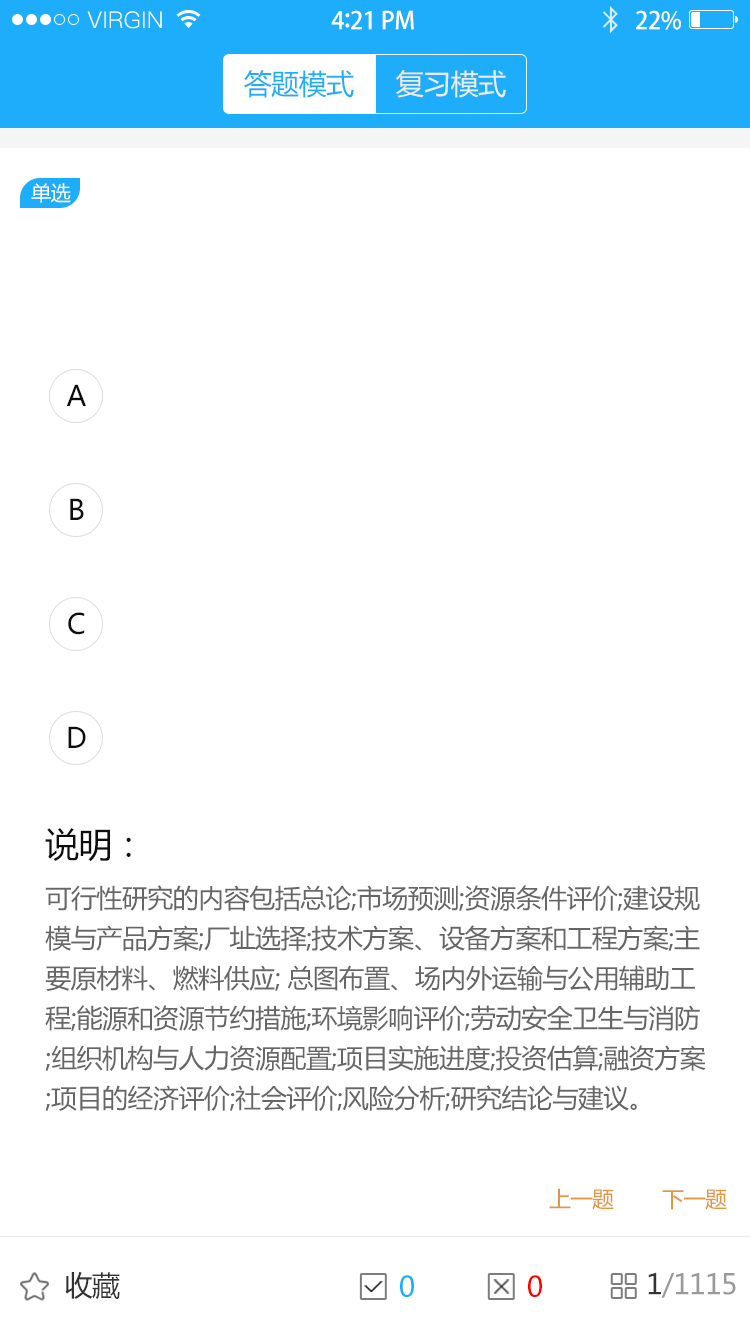
<style>
.page{position:relative;width:750px;height:1334px;background:#ffffff}
.page>*{position:absolute;margin:0}
.t1{font:23px "PingFang-SC-Regular";letter-spacing:0.02em;color:#ffffff}
.t2{font:24px "AdobeHeitiStd-Regular";letter-spacing:-0.02em;color:#ffffff}
.t3{font:26px "AdobeHeitiStd-Regular";letter-spacing:-0.02em;color:#ffffff}
.t4{font:28px "MicrosoftYaHei";letter-spacing:-0.02em;color:#1dadfa}
.t5{font:28px "MicrosoftYaHei";letter-spacing:-0.02em;color:#ebebeb}
.t6{font:20px "MicrosoftYaHei";letter-spacing:-0.02em;color:#fefefe}
.t7{font:28px "MicrosoftYaHei";letter-spacing:-0.02em;color:#0e0e0e}
.t8{font:34px "MicrosoftYaHei";letter-spacing:-0.02em;color:#0e0e0e}
.t9{font:26px/40px "MicrosoftYaHei";letter-spacing:-0.02em;color:#666666}
.t10{font:22px "MicrosoftYaHei";letter-spacing:-0.02em;color:#e6943e}
.t11{font:28px "MicrosoftYaHei";letter-spacing:-0.02em;color:#333333}
.t12{font:28px "MicrosoftYaHei";letter-spacing:-0.02em;color:#1dacf9}
.t13{font:28px "MicrosoftYaHei";letter-spacing:-0.02em;color:#ff0000}
.t14{font:28px "MicrosoftYaHei";letter-spacing:-0.02em;color:#999999}
</style>
<div class="page">
<p class="t1" style="left:87px;top:11px;width:75px;height:18px">VIRGIN</p>
<p class="t2" style="left:331px;top:10px;width:83px;height:20px">4<span class="t3">:</span>21 PM</p>
<p class="t2" style="left:636px;top:10px;width:45px;height:20px">22%</p>
<p class="t4" style="left:244px;top:70px;width:110px;height:28px">答题模式</p>
<p class="t5" style="left:396px;top:70px;width:110px;height:28px">复习模式</p>
<p class="t6" style="left:31px;top:183px;width:40px;height:20px">单选</p>
<p class="t7" style="left:66px;top:384px;width:20px;height:22px">A</p>
<p class="t7" style="left:70px;top:498px;width:14px;height:22px">B</p>
<p class="t7" style="left:68px;top:612px;width:17px;height:23px">C</p>
<p class="t7" style="left:68px;top:726px;width:18px;height:22px">D</p>
<p class="t8" style="left:45px;top:828px;width:86px;height:34px">说明：</p>
<p class="t9" style="left:45px;top:885px;width:661px;height:226px">可行性研究的内容包括总论;市场预测;资源条件评价;建设规<br>模与产品方案;厂址选择;技术方案、设备方案和工程方案;主<br>要原材料、燃料供应; 总图布置、场内外运输与公用辅助工<br>程;能源和资源节约措施;环境影响评价;劳动安全卫生与消防<br>;组织机构与人力资源配置;项目实施进度;投资估算;融资方案<br>;项目的经济评价;社会评价;风险分析;研究结论与建议。</p>
<p class="t10" style="left:549px;top:1188px;width:65px;height:22px">上一题</p>
<p class="t10" style="left:662px;top:1189px;width:65px;height:21px">下一题</p>
<p class="t11" style="left:65px;top:1272px;width:55px;height:27px">收藏</p>
<p class="t12" style="left:400px;top:1275px;width:14px;height:22px">0</p>
<p class="t13" style="left:528px;top:1275px;width:14px;height:22px">0</p>
<p class="t14" style="left:648px;top:1272px;width:88px;height:26px"><span class="t11">1</span>/1115</p>
</div>
